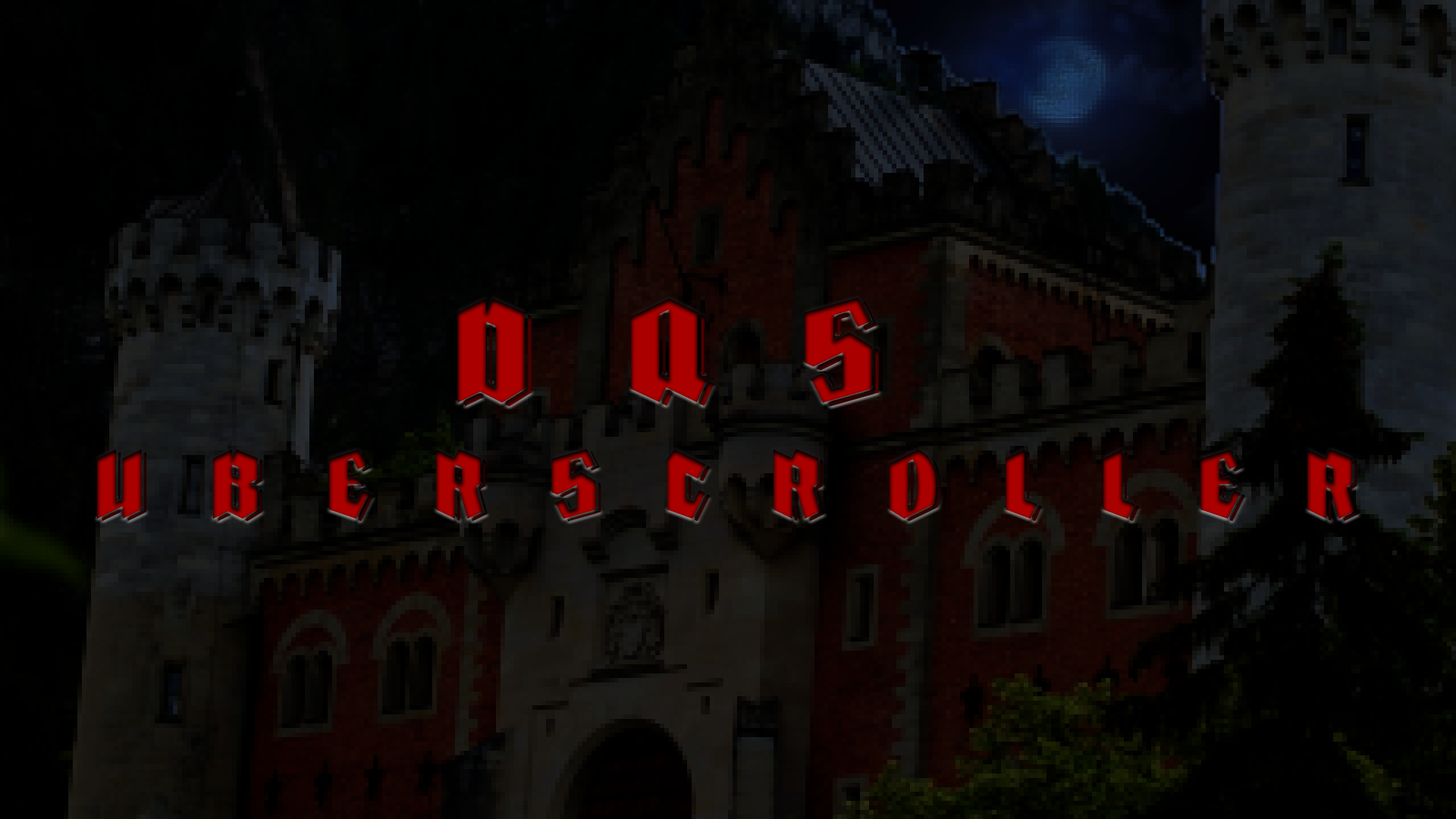
<style>
.page{position:relative;width:1456px;height:819px}
.page>*{position:absolute;margin:0}
.t1{font:75.8px/152.4px "FariseaDark";letter-spacing:0.763em;color:#aa0000}
.t2{font:113.7px/152.4px "FariseaDark";letter-spacing:0.763em;color:#aa0000}
</style>
<div class="page">
<p class="t1" style="left:97px;top:297px;width:1262px;height:225px;text-align:center"><span class="t2">DAS <br></span>UBERSCROLLER</p>
</div>
